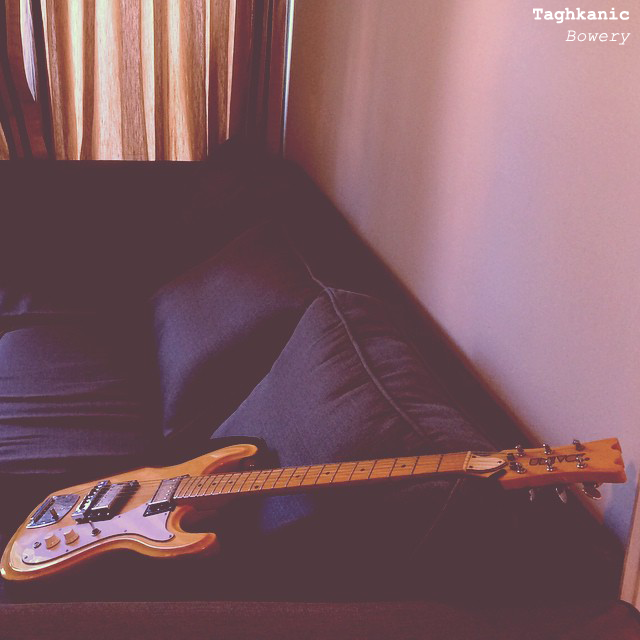
<style>
.page{position:relative;width:640px;height:640px;background:#50393f}
.page>*{position:absolute;margin:0}
.t1{font:18px "CourierNewPS-BoldMT";color:#ffffff}
.t2{font:18px "CourierNewPS-ItalicMT";color:#ffffff}
</style>
<div class="page">
<p class="t1" style="left:533px;top:7px;width:98px;height:38px;text-align:right">Taghkanic<br><span class="t2">Bowery</span></p>
</div>
